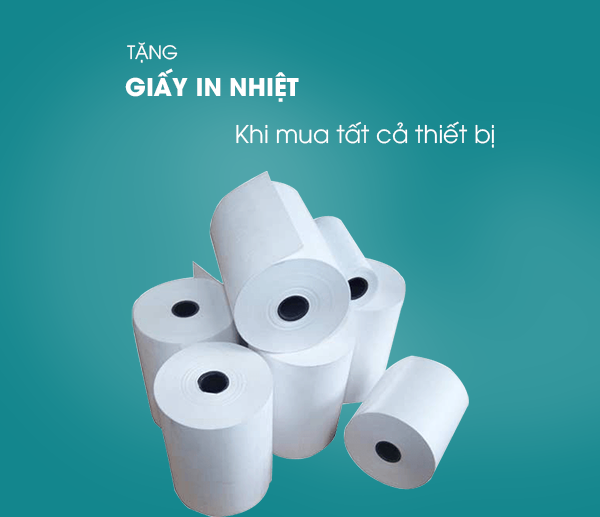
<style>
.page{position:relative;width:600px;height:517px}
.page>*{position:absolute;margin:0}
.t1{font:18.2px "UTM-Avo";color:#ffffff;text-transform:uppercase}
.t2{font:24.3px "UTMAvoBold";color:#ffffff;text-transform:uppercase}
.t3{font:24.3px "UTM-Avo";color:#ffffff}
</style>
<div class="page">
<p class="t1" style="left:127px;top:42px;width:51px;height:21px">Tặng</p>
<p class="t2" style="left:125px;top:68px;width:174px;height:34px">giấy In Nhiệt</p>
<p class="t3" style="left:236px;top:121px;width:258px;height:27px">Khi mua tất cả thiết bị</p>
</div>
